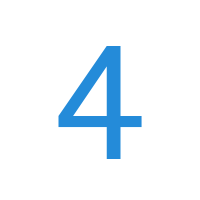
<style>
.page{position:relative;width:200px;height:200px;background:#ffffff}
.page>*{position:absolute;margin:0}
.t1{font:150px "Monaco";color:#248bd9}
</style>
<div class="page">
<p class="t1" style="left:58px;top:46px;width:84px;height:113px">4</p>
</div>
